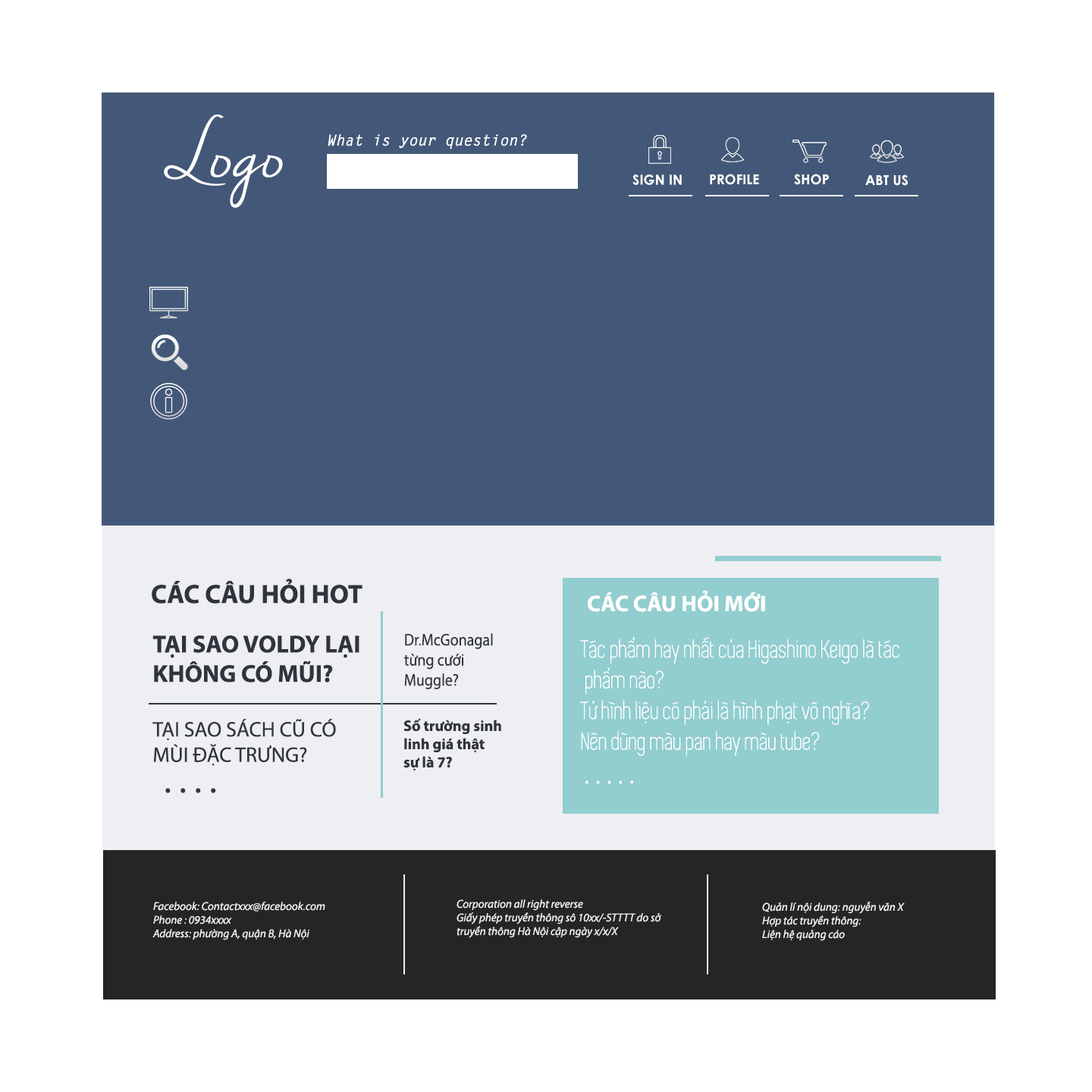
<style>
.page{position:relative;width:1092px;height:1092px;background:#ffffff}
.page>*{position:absolute;margin:0}
.t1{font:72.4px "NellaSueDemo";color:#ffffff}
.t2{font:15.2px "LetterGothicStd-BoldSlanted";color:#ffffff}
.t3{font:13.6px "CenturyGothic-Bold";color:#ffffff}
.t4{font:26.6px "MyriadPro-Bold";color:#31343d}
.t5{font:22.7px "MyriadPro-Bold";color:#ffffff}
.t6{font:24.6px "MyriadPro-Bold";color:#31343d}
.t7{font:16.8px "MyriadPro-Regular";color:#31343d;scale:0.9 1}
.t8{font:16.8px "MyriadPro-Bold";color:#31343d;scale:0.9 1}
.t9{font:25.6px "iCielSimplifica";color:#ffffff}
.t10{font:21.1px "MyriadPro-Regular";color:#31343d}
.t11{font:15.2px "MyriadPro-Bold";color:#31343d}
.t12{font:37.9px "iCielSimplifica";color:#ffffff}
.t13{font:36.1px "MyriadPro-Regular";color:#31343d}
.t14{font:11.4px "MyriadPro-It";color:#eeeff2}
</style>
<div class="page">
<p class="t1" style="left:164px;top:115px;width:119px;height:93px">Logo</p>
<p class="t2" style="left:328px;top:134px;width:199px;height:15px">What is your question?</p>
<p class="t3" style="left:710px;top:174px;width:49px;height:11px">PROFILE</p>
<p class="t3" style="left:794px;top:174px;width:35px;height:11px">SHOP</p>
<p class="t3" style="left:632px;top:174px;width:50px;height:11px">SIGN IN</p>
<p class="t3" style="left:865px;top:174px;width:43px;height:12px">ABT US</p>
<p class="t4" style="left:152px;top:579px;width:210px;height:25px">CÁC CÂU HỎI HOT</p>
<p class="t5" style="left:588px;top:590px;width:177px;height:22px">CÁC CÂU HỎI MỚI</p>
<p class="t6" style="left:152px;top:635px;width:207px;height:47px">TẠI SAO VOLDY LẠI<br>KHÔNG CÓ MŨI?</p>
<p class="t7" style="left:404px;top:633px;width:89px;height:56px"><span class="t8"><br></span>Dr.McGonagal <br>từng cưới <br>Muggle?</p>
<p class="t9" style="left:580px;top:637px;width:319px;height:119px">Tác phẩm hay nhất của Higashino Keigo là tác<br> phẩm nào?<br>Tử hình liệu có phải là hình phạt vô nghĩa?<br>Nên dùng màu pan hay màu tube?</p>
<p class="t10" style="left:152px;top:719px;width:184px;height:47px">TẠI SAO SÁCH CŨ CÓ<br>MÙI ĐẶC TRƯNG?</p>
<p class="t11" style="left:403px;top:718px;width:98px;height:53px">Số trường sinh <br>linh giá thật<br>sự là 7?</p>
<p class="t12" style="left:585px;top:780px;width:48px;height:4px">. . . . .</p>
<p class="t13" style="left:165px;top:788px;width:51px;height:5px">. . . .</p>
<p class="t14" style="left:152px;top:902px;width:173px;height:38px">Facebook: Contactxxx@facebook.com<br>Phone : 0934xxxx<br>Address: phường A, quận B, Hà Nội</p>
<p class="t14" style="left:457px;top:899px;width:204px;height:39px">Corporation all right reverse<br>Giấy phép truyền thông sô 10xx/-STTTT do sở <br>truyền thông Hà Nội cập ngày x/x/X</p>
<p class="t14" style="left:762px;top:902px;width:143px;height:39px">Quản lí nội dung: nguyễn văn X<br>Hợp tác truyền thông:<br>Liện hệ quảng cáo</p>
</div>
